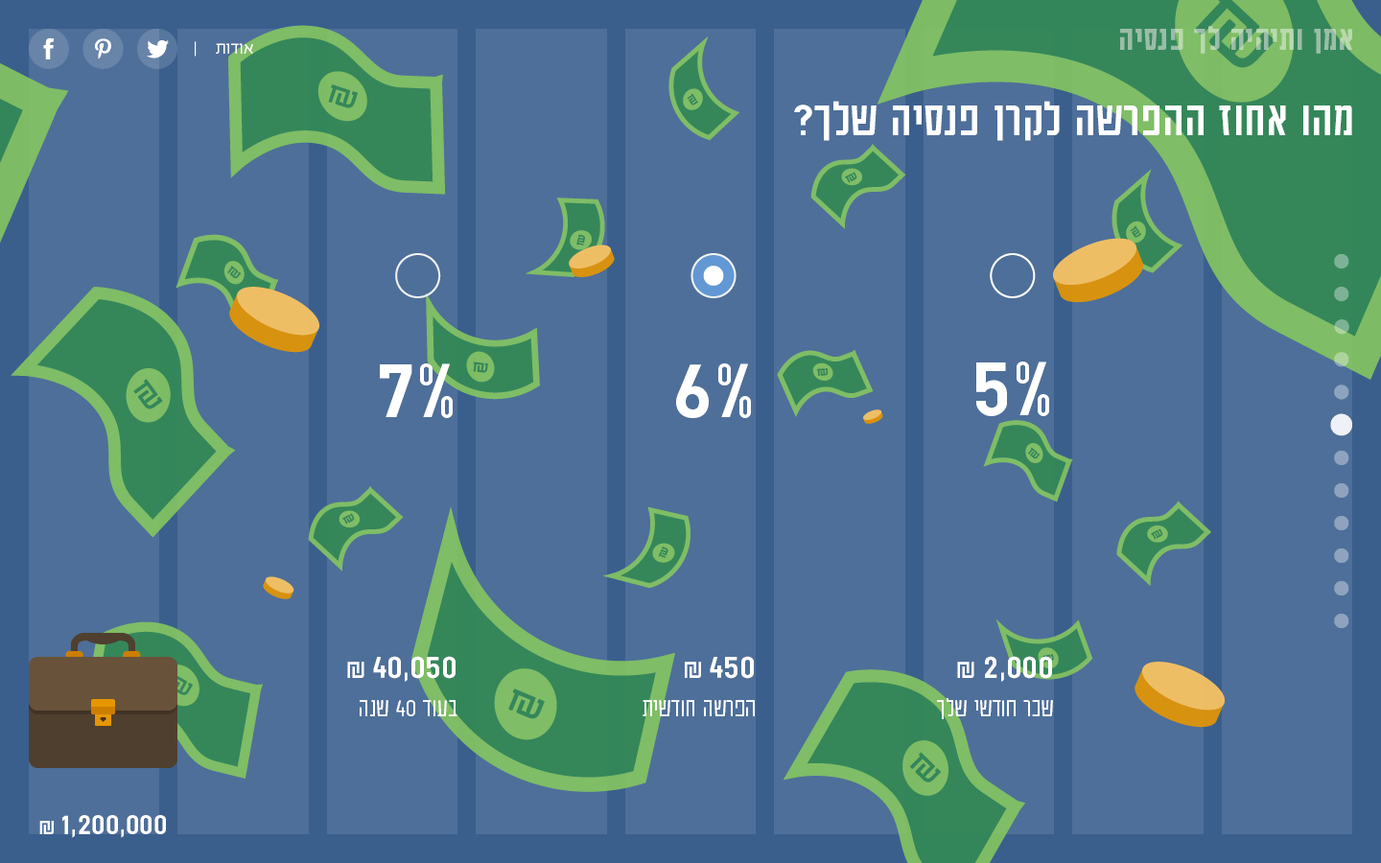
<style>
.page{position:relative;width:1381px;height:863px;background:#4e6f99}
.page>*{position:absolute;margin:0}
.t1{font:37.8px "AdumaFOT-Medium"}
.t2{font:19.2px "EzerBlock_OE-Light";color:#ffffff}
.t3{font:35.4px "Raanan-Bold";color:#328a53}
.t4{font:13.1px "Raanan-Bold";color:#328a53}
.t5{font:53.8px "AdumaFOT-Regular";color:#ffffff}
.t6{font:13.4px "Raanan-Bold";color:#328a53}
.t7{font:15.4px "Raanan-Bold";color:#328a53}
.t8{font:95.9px "AdumaFOT-Regular";color:#ffffff}
.t9{font:18.6px "Raanan-Bold";color:#328a53}
.t10{font:35.5px "Raanan-Bold";color:#328a53}
.t11{font:28.8px/39px "AdumaFOT-Light";color:#ffffff}
.t12{font:38.4px/39px "AdumaFOT-Regular";color:#ffffff}
.t13{font:28.8px/39px "AdumaFOT-Regular";color:#ffffff}
.t14{font:28.3px "Raanan-Bold";color:#328a53}
.t15{font:42.8px "Raanan-Bold";color:#328a53}
.t16{font:36.5px "Raanan-Bold";color:#328a53}
.t17{font:33.6px "AdumaFOT-Regular";color:#ffffff}
.t18{font:24px "AdumaFOT-Regular";color:#ffffff}
</style>
<div class="page">
<p class="t1" style="left:1120px;top:26px;width:232px;height:28px">אמן ותיהיה לך פנסיה</p>
<p class="t2" style="left:195px;top:41px;width:58px;height:16px">אודות     |</p>
<p class="t3" style="left:328px;top:84px;width:30px;height:24px">₪</p>
<p class="t4" style="left:687px;top:93px;width:11px;height:13px">₪</p>
<p class="t5" style="left:794px;top:101px;width:558px;height:40px">מהו אחוז ההפרשה לקרן פנסיה שלך?</p>
<p class="t6" style="left:845px;top:172px;width:13px;height:11px">₪</p>
<p class="t4" style="left:1130px;top:225px;width:11px;height:13px">₪</p>
<p class="t4" style="left:576px;top:234px;width:9px;height:12px">₪</p>
<p class="t7" style="left:227px;top:266px;width:15px;height:13px">₪</p>
<p class="t8" style="left:380px;top:364px;width:73px;height:54px">7%</p>
<p class="t9" style="left:473px;top:362px;width:15px;height:11px">₪</p>
<p class="t8" style="left:676px;top:364px;width:75px;height:54px">6%</p>
<p class="t8" style="left:976px;top:362px;width:73px;height:54px">5%</p>
<p class="t6" style="left:816px;top:368px;width:13px;height:8px">₪</p>
<p class="t10" style="left:133px;top:379px;width:30px;height:31px">₪</p>
<p class="t6" style="left:1028px;top:448px;width:13px;height:11px">₪</p>
<p class="t6" style="left:342px;top:513px;width:13px;height:12px">₪</p>
<p class="t6" style="left:1151px;top:529px;width:13px;height:11px">₪</p>
<p class="t4" style="left:658px;top:547px;width:11px;height:11px">₪</p>
<p class="t11" style="left:347px;top:656px;width:111px;height:61px"><span class="t12">40,050</span><span class="t13"> ₪<br></span>בעוד 40 שנה</p>
<p class="t11" style="left:643px;top:656px;width:112px;height:61px"><span class="t12">450</span><span class="t13"> ₪<br></span>הפרשה חודשית</p>
<p class="t11" style="left:937px;top:656px;width:116px;height:63px"><span class="t12">2,000</span><span class="t13"> ₪<br></span>שכר חודשי שלך</p>
<p class="t14" style="left:168px;top:674px;width:25px;height:21px">₪</p>
<p class="t15" style="left:508px;top:689px;width:37px;height:30px">₪</p>
<p class="t16" style="left:910px;top:752px;width:31px;height:31px">₪</p>
<p class="t17" style="left:39px;top:815px;width:127px;height:23px">1,200,000<span class="t18"> ₪</span></p>
</div>
